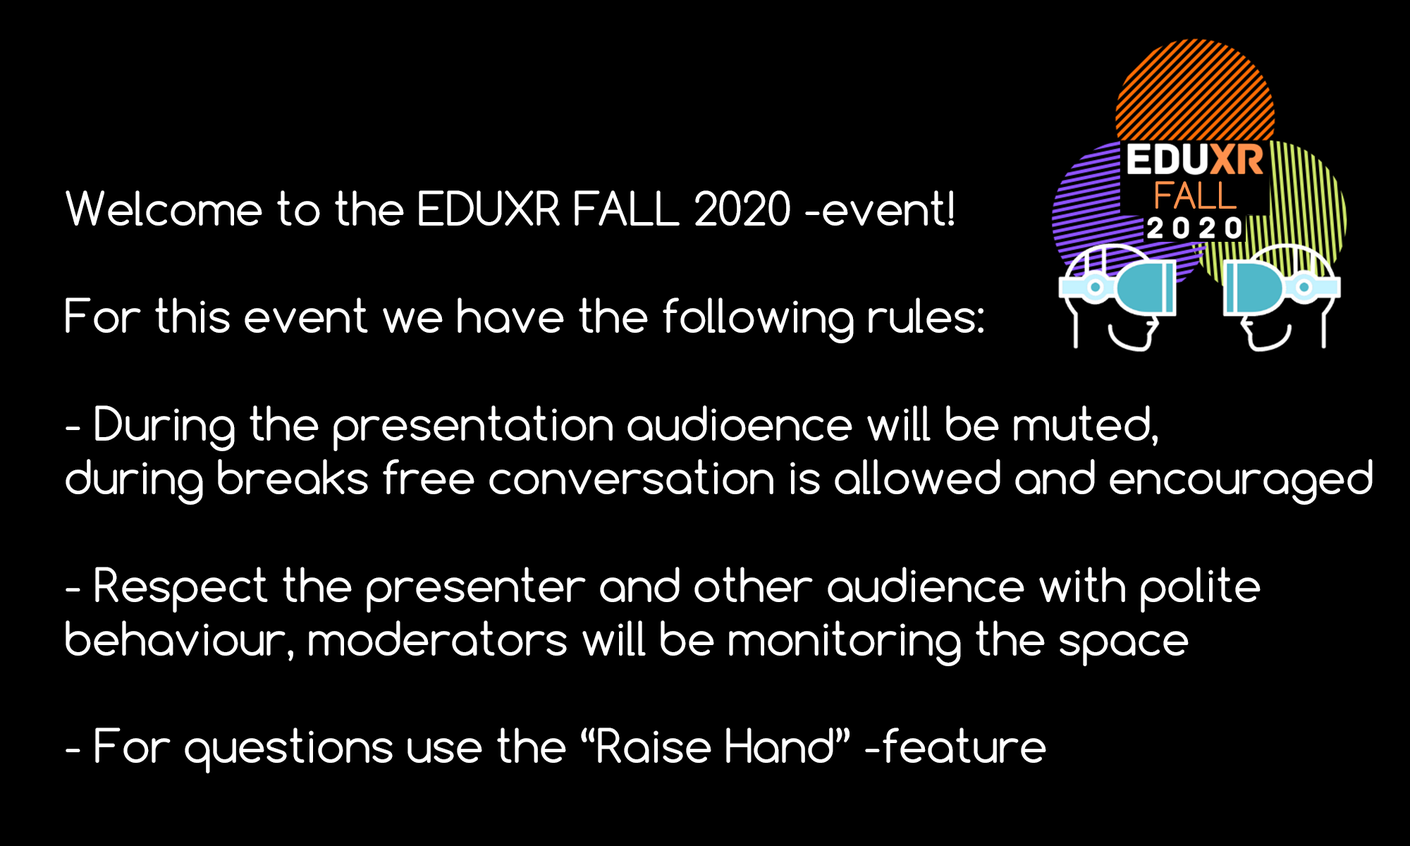
<style>
.page{position:relative;width:1410px;height:846px;background:#000000}
.page>*{position:absolute;margin:0}
.t1{font:35px "Comfortaa-Regular";color:#ff914d}
.t2{font:44.8px "Comfortaa-Regular";color:#ffffff}
</style>
<div class="page">
<p class="t1" style="left:1155px;top:181px;width:81px;height:28px">FALL</p>
<p class="t2" style="left:66px;top:190px;width:1306px;height:583px">Welcome to the EDUXR FALL 2020 -event!<br><br>For this event we have the following rules:<br><br>- During the presentation audioence will be muted, <br>during breaks free conversation is allowed and encouraged<br><br>- Respect the presenter and other audience with polite <br>behaviour, moderators will be monitoring the space<br><br>- For questions use the “Raise Hand” -feature</p>
</div>
